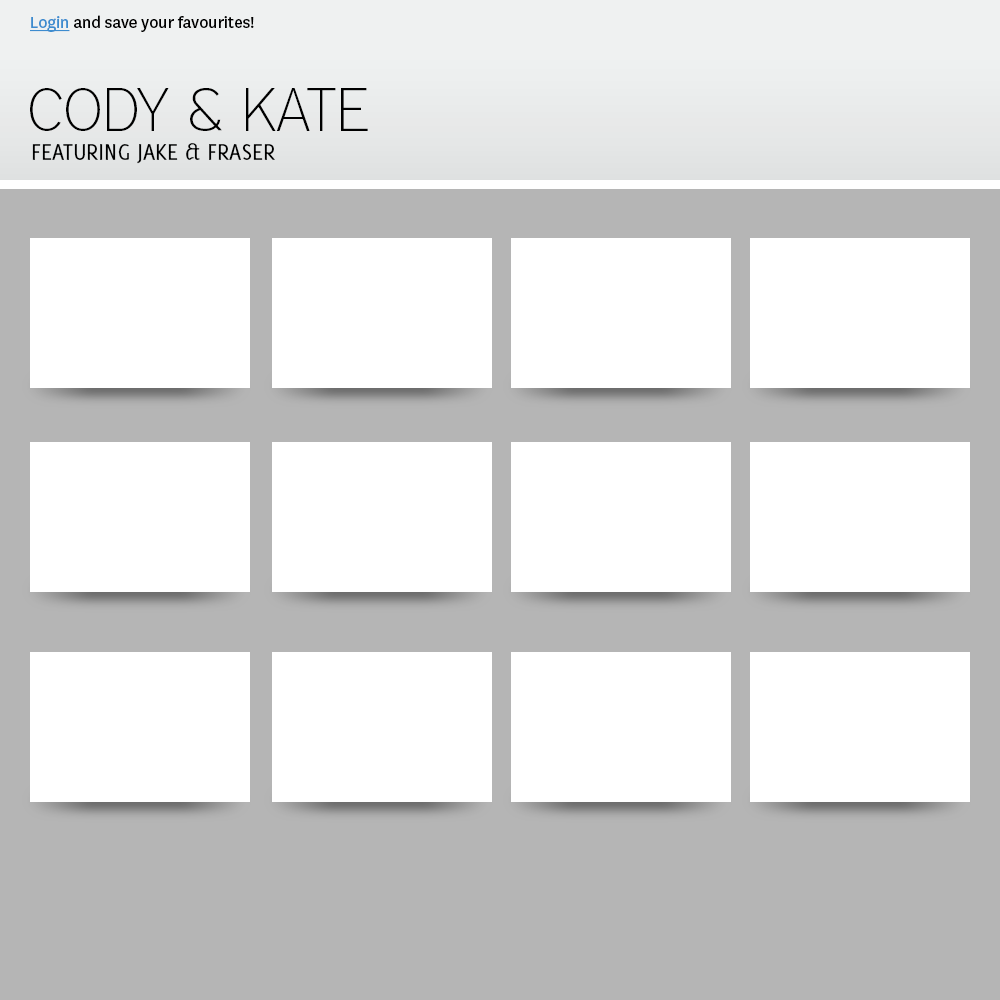
<style>
.page{position:relative;width:1000px;height:1000px;background:#ffffff}
.page>*{position:absolute;margin:0}
.t1{font:18px "National-Regular";color:#000000}
.t2{font:18px "National-Regular";color:#3d8ccf;text-decoration:underline}
.t3{font:60px "District-Thin";color:#000000;text-transform:uppercase}
.t4{font:24px "Delicious-Roman";color:#000000;text-transform:uppercase}
</style>
<div class="page">
<p class="t1" style="left:30px;top:15px;width:224px;height:17px"><span class="t2">Login</span> and save your favourites!</p>
<p class="t3" style="left:30px;top:88px;width:338px;height:43px">Cody &amp; Kate</p>
<p class="t4" style="left:32px;top:143px;width:243px;height:21px">featuring Jake &amp; Fraser</p>
</div>
